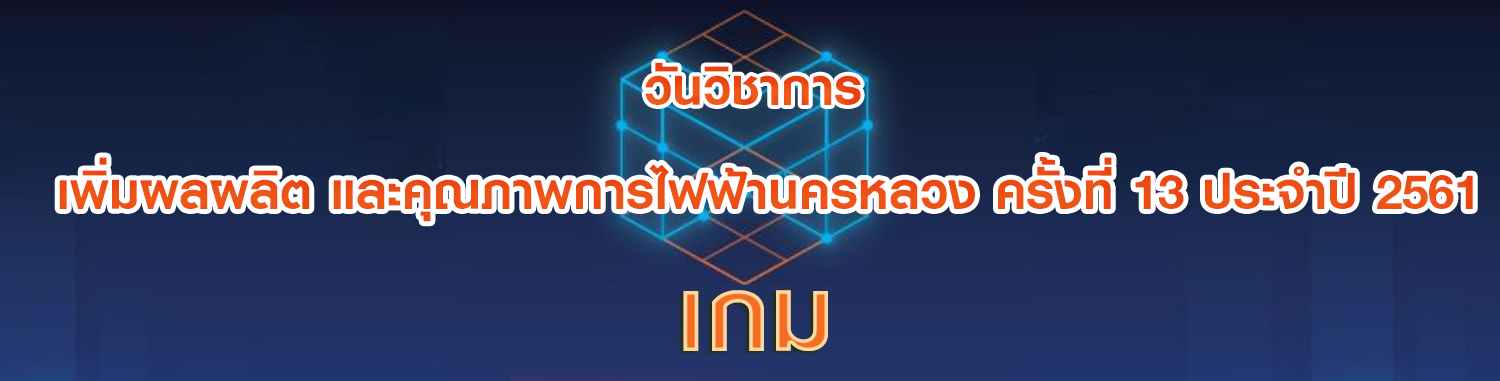
<style>
.page{position:relative;width:1500px;height:381px}
.page>*{position:absolute;margin:0}
.t1{font:72px "KittithadaBold75P";color:#ec4d13}
.t2{font:72px "KittithadaBold75P";color:#ed5115}
.t3{font:150px "KittithadaBold75F"}
</style>
<div class="page">
<p class="t1" style="left:645px;top:62px;width:216px;height:43px">วันวิชาการ</p>
<p class="t2" style="left:59px;top:157px;width:1414px;height:65px">เพิ่มผลผลิต และคุณภาพการไฟฟ้านครหลวง ครั้งที่ 13 ประจำปี 2561</p>
<p class="t3" style="left:683px;top:290px;width:145px;height:61px">เกม</p>
</div>
